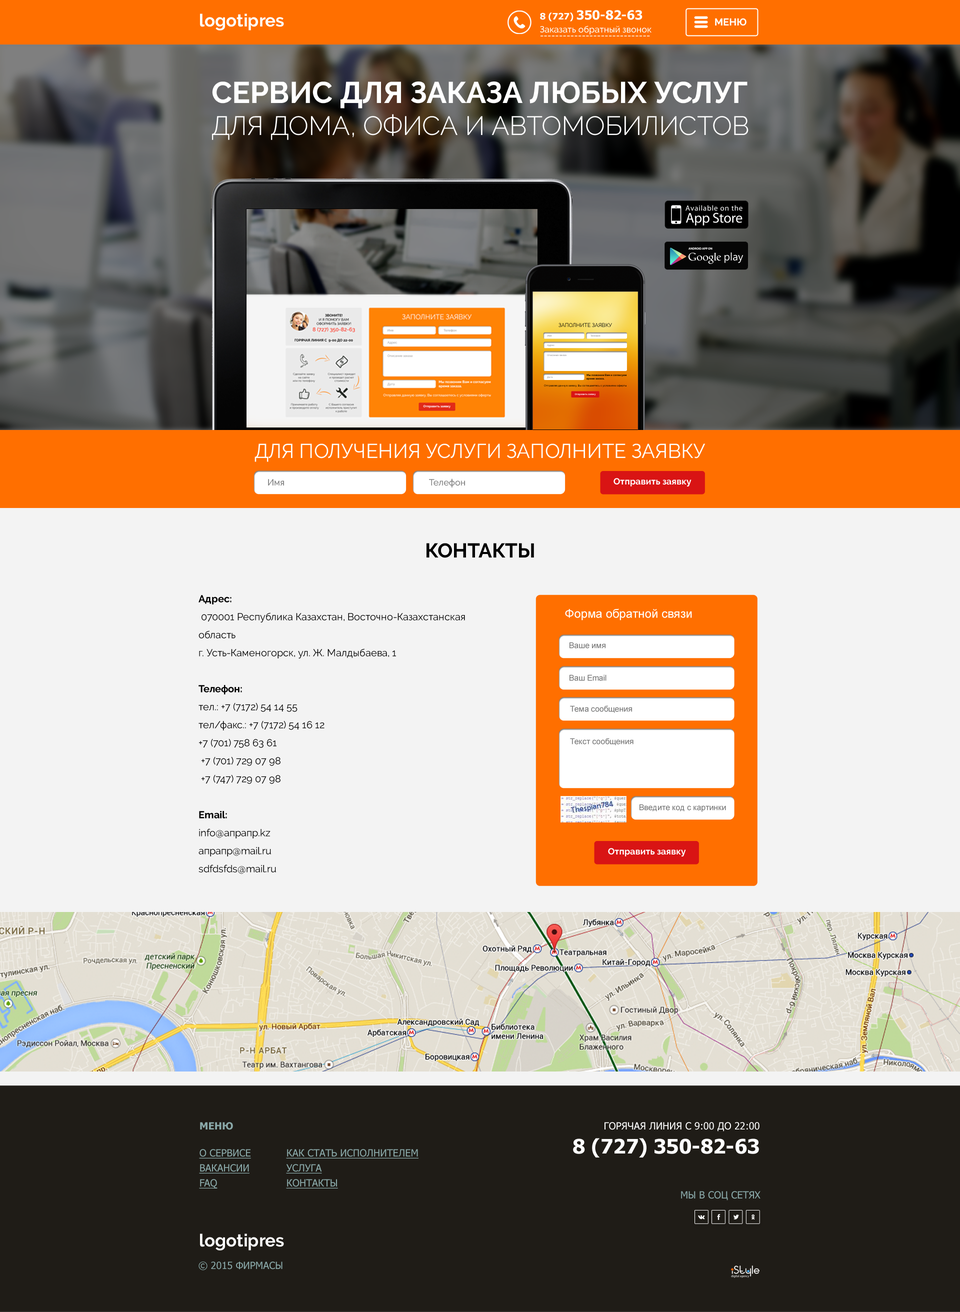
<style>
.page{position:relative;width:960px;height:1312px;background:#f3f3f3}
.page>*{position:absolute;margin:0}
.t1{font:17.5px "Raleway-Bold";color:#fefefe}
.t2{font:12.5px "Tahoma-Bold";color:#ffffff}
.t3{font:9px "Tahoma-Bold";color:#ffffff}
.t4{font:9px "Raleway-Medium";color:#ffffff}
.t5{font:10px "Raleway-Bold";color:#ffffff;text-transform:uppercase}
.t6{font:9px "Raleway-Medium"}
.t7{font:26.5px "Raleway-Light";color:#ffffff;text-transform:uppercase}
.t8{font:30px "Raleway-Bold";color:#ffffff;text-transform:uppercase}
.t9{font:5.4px "Raleway-Regular";text-transform:uppercase}
.t10{font:2.4px "Raleway-Medium"}
.t11{font:2.7px "Raleway-Bold"}
.t12{font:2.7px "Raleway-Medium"}
.t13{font:2.4px "Raleway-Bold"}
.t14{font:20px "Raleway-Regular";color:#ffffff;text-transform:uppercase}
.t15{font:9px "Raleway-Medium";color:#808080}
.t16{font:9px "Raleway-Bold";color:#ffffff}
.t17{font:20px "Raleway-Bold";color:#000000;text-transform:uppercase}
.t18{font:10px/18px "Raleway-Regular";color:#000000}
.t19{font:10px/18px "Raleway-Bold";color:#000000}
.t20{font:12.1px "ArialMT";color:#ffffff}
.t21{font:8px "ArialMT";color:#737373}
.t22{font:10px "Tahoma-Bold";color:#8aa9a9;text-transform:uppercase}
.t23{font:10px "Tahoma";color:#ffffff;text-transform:uppercase}
.t24{font:20px "Tahoma-Bold";color:#ffffff;text-transform:uppercase}
.t25{font:10px/15px "Tahoma";color:#8aa9a9;text-transform:uppercase;text-decoration:underline}
.t26{font:10px "Tahoma";color:#8aa9a9;text-transform:uppercase}
</style>
<div class="page">
<p class="t1" style="left:200px;top:14px;width:84px;height:16px">logotipres</p>
<p class="t2" style="left:540px;top:10px;width:102px;height:12px"><span class="t3">8 (727) </span>350-82-63</p>
<p class="t4" style="left:540px;top:26px;width:112px;height:8px">Заказать обратный звонок</p>
<p class="t5" style="left:715px;top:18px;width:31px;height:8px">МЕНЮ</p>
<p class="t6" style="left:540px;top:36px;width:110px;height:0px">-----------------------------</p>
<p class="t7" style="left:212px;top:82px;width:536px;height:58px"><span class="t8">СЕРВИС ДЛЯ ЗАКАЗА ЛЮБЫХ УСЛУГ <br></span>для дома, офиса и автомобилистов</p>
<p class="t9" style="left:558px;top:323px;width:54px;height:4px">Заполните заявку</p>
<p class="t10" style="left:547px;top:334px;width:5px;height:2px">Имя</p>
<p class="t10" style="left:590px;top:334px;width:10px;height:3px">Телефон</p>
<p class="t10" style="left:547px;top:344px;width:7px;height:2px">Адрес</p>
<p class="t10" style="left:547px;top:354px;width:19px;height:2px">Описание заказа</p>
<p class="t10" style="left:547px;top:376px;width:6px;height:2px">Дата</p>
<p class="t11" style="left:586px;top:374px;width:40px;height:6px">Мы позвоним Вам и согласуем <br>время заказа.</p>
<p class="t12" style="left:544px;top:384px;width:82px;height:3px">Отправляя данную заявку, Вы соглашаетесь с условиями оферты</p>
<p class="t13" style="left:574px;top:393px;width:22px;height:3px">Отправить заявку</p>
<p class="t14" style="left:254px;top:444px;width:452px;height:18px">Для получения услуги заполните заявку</p>
<p class="t15" style="left:268px;top:479px;width:16px;height:7px">Имя</p>
<p class="t15" style="left:429px;top:478px;width:36px;height:10px">Телефон</p>
<p class="t16" style="left:614px;top:478px;width:78px;height:8px">Отправить заявку</p>
<p class="t17" style="left:426px;top:543px;width:108px;height:15px">контакты</p>
<p class="t18" style="left:198px;top:595px;width:267px;height:279px"><span class="t19">Адрес:<br></span> 070001 Республика Казахстан, Восточно-Казахстанская область<br>г. Усть-Каменогорск, ул. Ж. Малдыбаева, 1<br><br><span class="t19">Телефон:<br></span>тел.: +7 (7172) 54 14 55<br>тел/факс.: +7 (7172) 54 16 12<br>+7 (701) 758 63 61<br> +7 (701) 729 07 98<br> +7 (747) 729 07 98<br> <br><span class="t19">Email:<br></span>info@апрапр.kz<br>апрапр@mail.ru<br>sdfdsfds@mail.ru</p>
<p class="t20" style="left:565px;top:608px;width:127px;height:12px">Форма обратной связи</p>
<p class="t21" style="left:570px;top:642px;width:36px;height:6px">Ваше имя</p>
<p class="t21" style="left:570px;top:674px;width:36px;height:7px">Ваш Email</p>
<p class="t21" style="left:570px;top:706px;width:62px;height:7px">Тема сообщения</p>
<p class="t21" style="left:570px;top:738px;width:64px;height:8px">Текст сообщения</p>
<p class="t21" style="left:640px;top:804px;width:86px;height:8px">Введите код с картинки</p>
<p class="t16" style="left:608px;top:848px;width:78px;height:8px">Отправить заявку</p>
<p class="t22" style="left:200px;top:1122px;width:33px;height:8px">МЕНЮ</p>
<p class="t23" style="left:573px;top:1122px;width:187px;height:36px;text-align:right">Горячая линия с 9:00 до 22:00<br><span class="t24">8 (727) 350-82-63</span></p>
<p class="t25" style="left:199px;top:1149px;width:52px;height:39px">О cервисе<br>Вакансии<br>faq</p>
<p class="t25" style="left:286px;top:1149px;width:132px;height:39px">Как стать исполнителем<br>услуга<br>контакты</p>
<p class="t26" style="left:681px;top:1191px;width:79px;height:9px">Мы в соц сетях</p>
<p class="t1" style="left:200px;top:1234px;width:84px;height:16px">logotipres</p>
<p class="t26" style="left:198px;top:1262px;width:84px;height:8px">© 2015 фирмасы</p>
</div>
